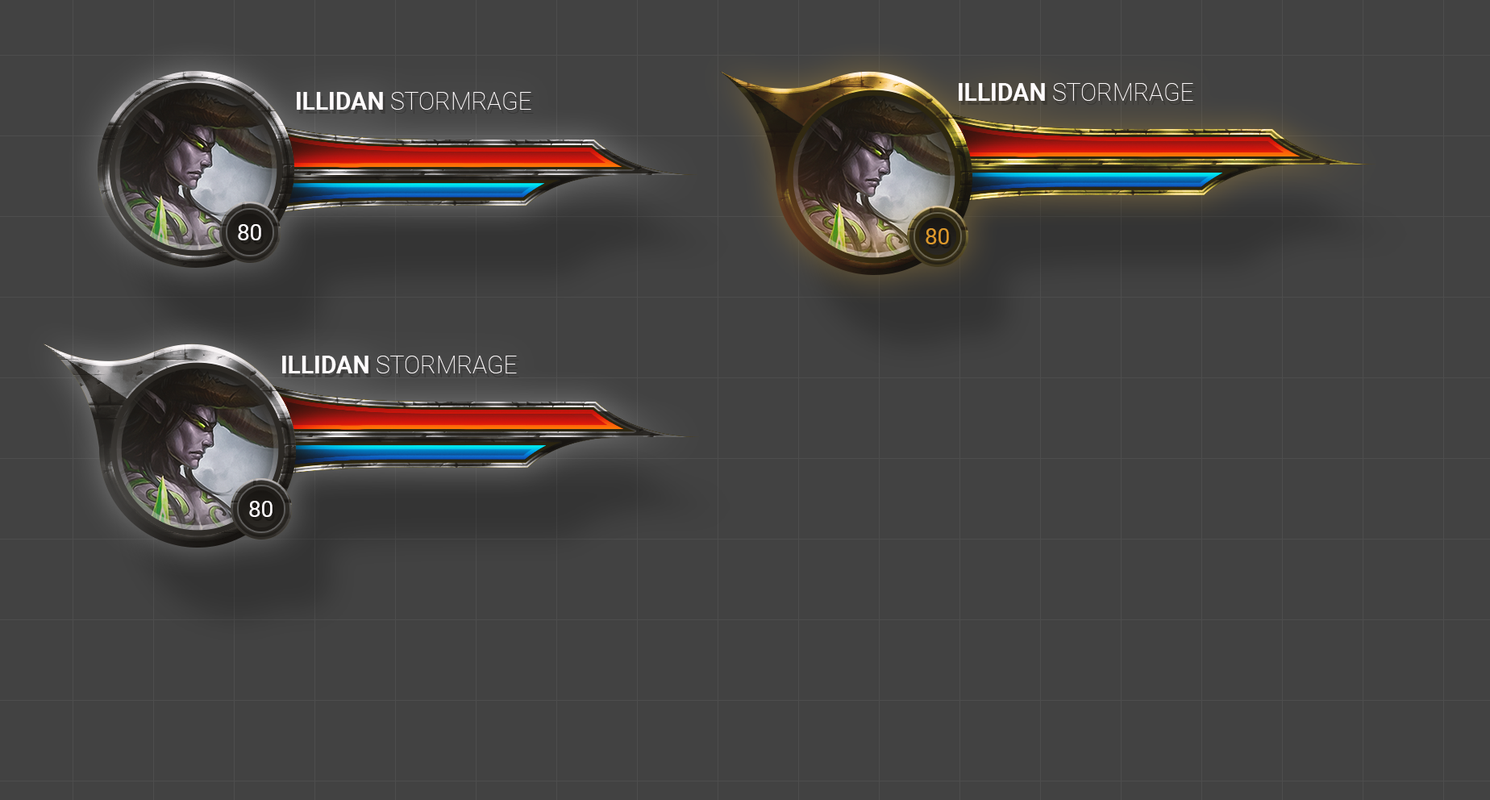
<style>
.page{position:relative;width:1490px;height:800px;background:#424242}
.page>*{position:absolute;margin:0}
.t1{font:24.2px "Roboto-Thin";color:#ffffff;text-transform:uppercase}
.t2{font:24.2px "Roboto-Bold";color:#ffffff;text-transform:uppercase}
.t3{font:22.6px "Roboto-Regular";color:#ffffff;text-transform:uppercase}
.t4{font:22.6px "Roboto-Regular";color:#c58724;text-transform:uppercase}
</style>
<div class="page">
<p class="t1" style="left:959px;top:83px;width:235px;height:18px"><span class="t2">Illidan </span>Stormrage</p>
<p class="t1" style="left:297px;top:92px;width:234px;height:18px"><span class="t2">Illidan </span>Stormrage</p>
<p class="t3" style="left:238px;top:224px;width:23px;height:16px">80</p>
<p class="t4" style="left:926px;top:228px;width:23px;height:16px">80</p>
<p class="t1" style="left:282px;top:356px;width:235px;height:17px"><span class="t2">Illidan </span>Stormrage</p>
<p class="t3" style="left:249px;top:501px;width:24px;height:16px">80</p>
</div>
